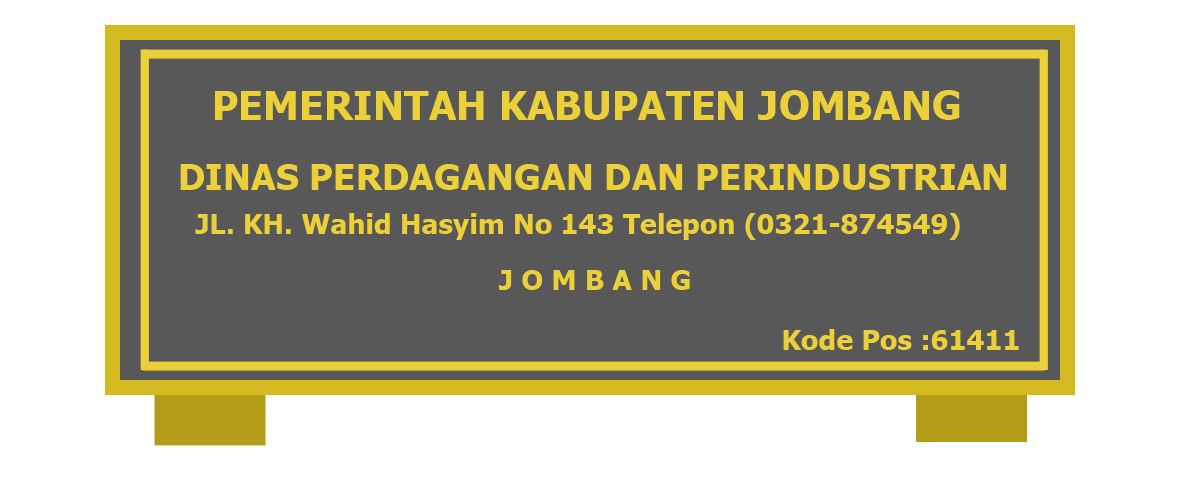
<style>
.page{position:relative;width:1200px;height:485px;background:#585858}
.page>*{position:absolute;margin:0}
.t1{font:40px "Tahoma-Bold";letter-spacing:0.005em;color:#ebd03a}
.t2{font:36px "Tahoma-Bold";letter-spacing:0.005em;color:#ebd03a}
.t3{font:28px "Tahoma-Bold";letter-spacing:0.005em;color:#ebd03a}
</style>
<div class="page">
<p class="t1" style="left:215px;top:90px;width:745px;height:30px">PEMERINTAH KABUPATEN JOMBANG</p>
<p class="t2" style="left:180px;top:164px;width:827px;height:26px">DINAS PERDAGANGAN DAN PERINDUSTRIAN</p>
<p class="t3" style="left:195px;top:213px;width:765px;height:27px">JL. KH. Wahid Hasyim No 143 Telepon (0321-874549)</p>
<p class="t3" style="left:499px;top:270px;width:191px;height:20px">J O M B A N G</p>
<p class="t3" style="left:783px;top:329px;width:236px;height:21px">Kode Pos :61411</p>
</div>
